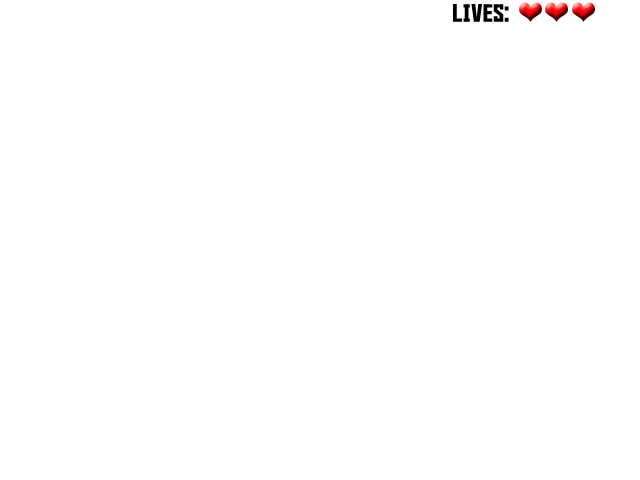
<style>
.page{position:relative;width:640px;height:480px;background:#ffffff}
.page>*{position:absolute;margin:0}
.t1{font:25px "AldotheApache";color:#000000}
</style>
<div class="page">
<p class="t1" style="left:453px;top:4px;width:56px;height:18px">LIVES:</p>
</div>
